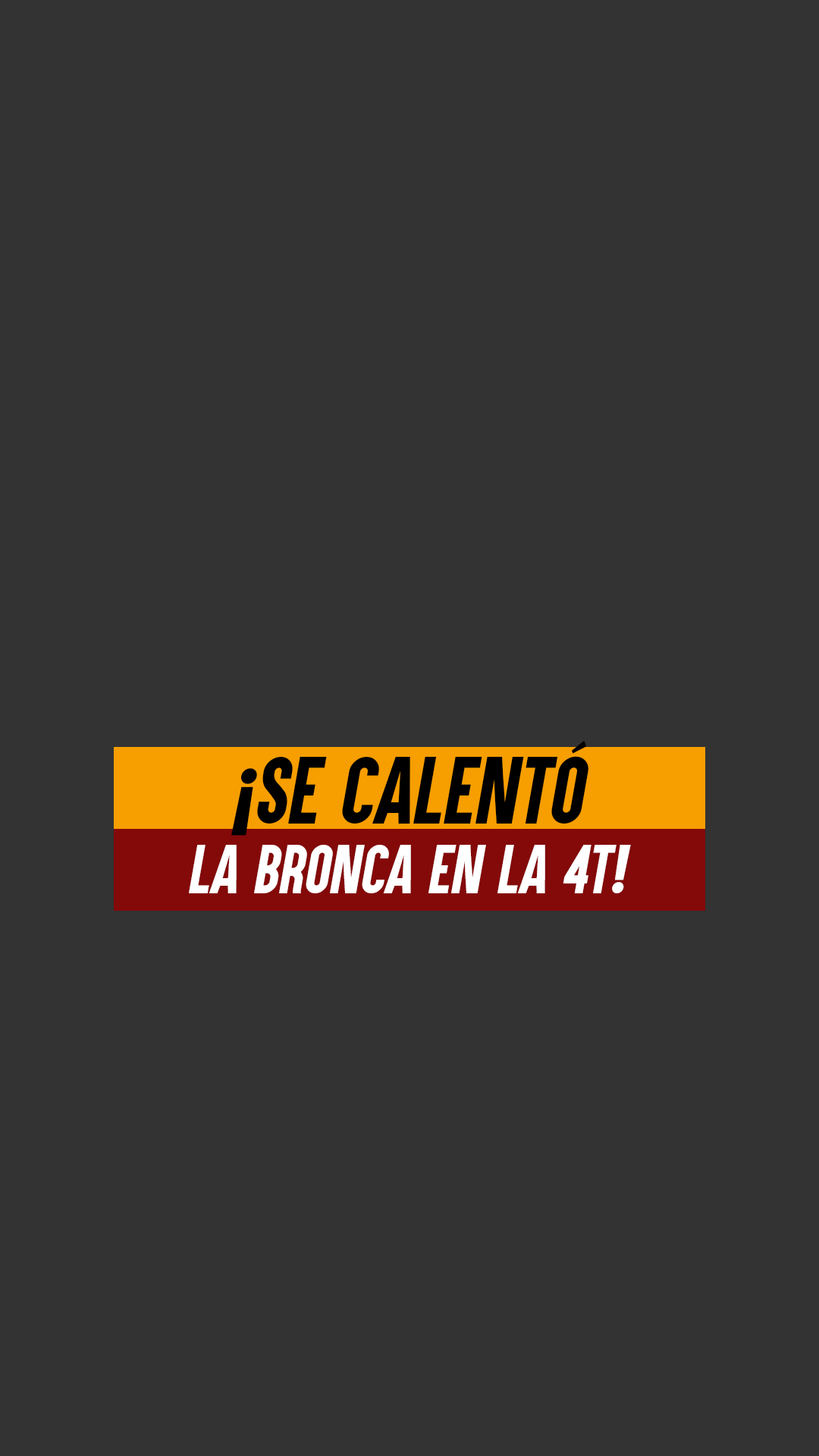
<style>
.page{position:relative;width:819px;height:1456px;background:#333333}
.page>*{position:absolute;margin:0}
.t1{font:78.9px "Aku&Kamu";color:#000000;font-style:italic}
.t2{font:57.2px "Aku&Kamu";color:#ffffff;font-style:italic}
</style>
<div class="page">
<p class="t1" style="left:231px;top:740px;width:357px;height:96px">¡SE CALENTÓ</p>
<p class="t2" style="left:189px;top:845px;width:442px;height:48px">LA BRONCA EN LA 4T!</p>
</div>
